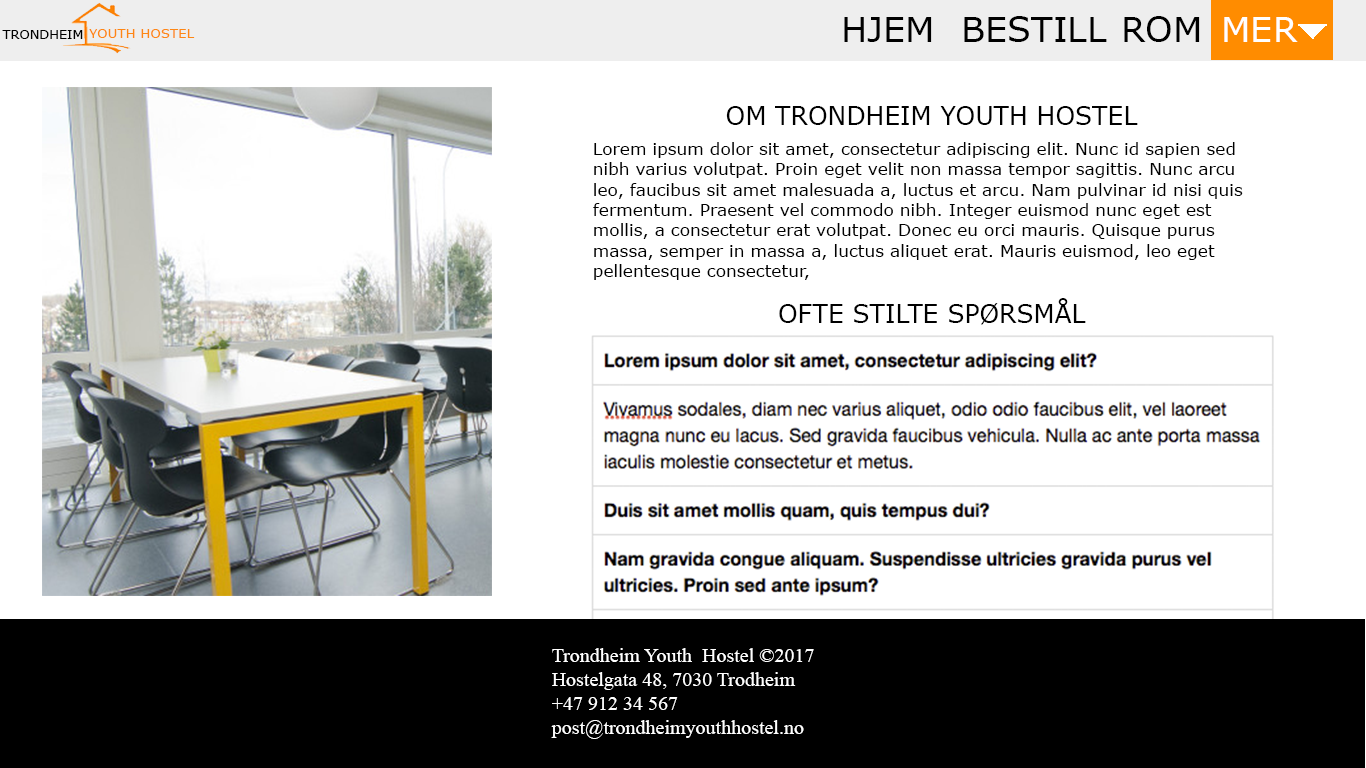
<style>
.page{position:relative;width:1366px;height:768px;background:#ffffff}
.page>*{position:absolute;margin:0}
.t1{font:35px "Verdana";color:#000000}
.t2{font:35px "Verdana";color:#ffffff}
.t3{font:12.9px "Verdana";color:#000000}
.t4{font:13.3px "Verdana";color:#fe8714}
.t5{font:25px "Verdana";color:#000000}
.t6{font:17px "Verdana";color:#000000}
.t7{font:20px "TimesNewRomanPSMT";color:#ffffff}
</style>
<div class="page">
<p class="t1" style="left:844px;top:17px;width:88px;height:25px">HJEM</p>
<p class="t1" style="left:964px;top:16px;width:143px;height:26px">BESTILL</p>
<p class="t1" style="left:1124px;top:16px;width:76px;height:26px">ROM</p>
<p class="t2" style="left:1224px;top:17px;width:74px;height:25px">MER</p>
<p class="t3" style="left:2px;top:30px;width:81px;height:9px">TRONDHEIM</p>
<p class="t4" style="left:89px;top:29px;width:106px;height:9px">YOUTH HOSTEL</p>
<p class="t5" style="left:726px;top:106px;width:412px;height:19px">OM TRONDHEIM YOUTH HOSTEL</p>
<p class="t6" style="left:593px;top:142px;width:650px;height:138px">Lorem ipsum dolor sit amet, consectetur adipiscing elit. Nunc id sapien sed nibh varius volutpat. Proin eget velit non massa tempor sagittis. Nunc arcu leo, faucibus sit amet malesuada a, luctus et arcu. Nam pulvinar id nisi quis fermentum. Praesent vel commodo nibh. Integer euismod nunc eget est mollis, a consectetur erat volutpat. Donec eu orci mauris. Quisque purus massa, semper in massa a, luctus aliquet erat. Mauris euismod, leo eget pellentesque consectetur,</p>
<p class="t5" style="left:779px;top:298px;width:307px;height:27px">OFTE STILTE SPØRSMÅL</p>
<p class="t7" style="left:551px;top:648px;width:263px;height:91px">Trondheim Youth  Hostel ©2017<br>Hostelgata 48, 7030 Trodheim<br>+47 912 34 567<br>post@trondheimyouthhostel.no</p>
</div>
